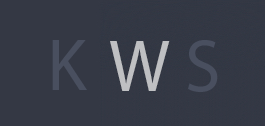
<style>
.page{position:relative;width:265px;height:126px;background:#343844}
.page>*{position:absolute;margin:0}
.t1{font:74.9px "MyriadPro-Regular";letter-spacing:-0.025em;color:#494f5f;scale:0.96 1}
.t2{font:74.9px "MyriadPro-Regular";letter-spacing:-0.025em;color:#bfc0c3;scale:0.96 1}
</style>
<div class="page">
<p class="t1" style="left:52px;top:40px;width:35px;height:50px">K</p>
<p class="t2" style="left:110px;top:41px;width:60px;height:50px">W</p>
<p class="t1" style="left:188px;top:40px;width:30px;height:52px">S</p>
</div>
